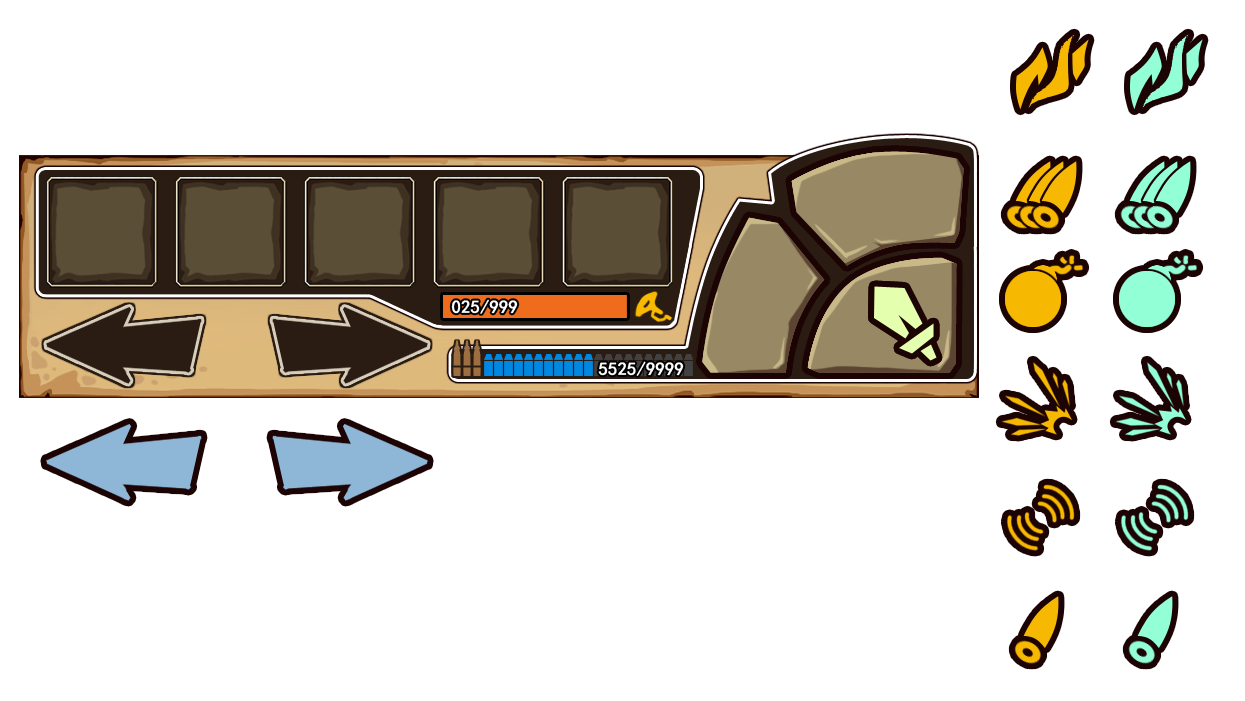
<style>
.page{position:relative;width:1245px;height:701px;background:#ffffff}
.page>*{position:absolute;margin:0}
.t1{font:18px "SimHei";color:#ffffff;font-weight:bold}
</style>
<div class="page">
<p class="t1" style="left:451px;top:299px;width:67px;height:15px">025/999</p>
<p class="t1" style="left:598px;top:361px;width:86px;height:15px">5525/9999</p>
</div>
